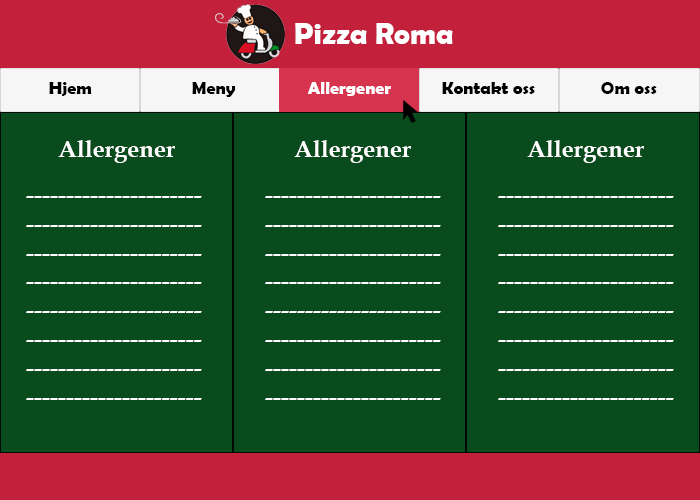
<style>
.page{position:relative;width:700px;height:500px;background:#094b1c}
.page>*{position:absolute;margin:0}
.t1{font:30px "BerlinSansFBDemi-Bold";color:#ffffff}
.t2{font:18px "BerlinSansFBDemi-Bold";color:#000000}
.t3{font:18px "BerlinSansFBDemi-Bold";color:#ffffff}
.t4{font:24px "BookAntiqua-Bold";color:#ffffff}
</style>
<div class="page">
<p class="t1" style="left:295px;top:23px;width:158px;height:21px">Pizza Roma</p>
<p class="t2" style="left:49px;top:82px;width:43px;height:14px">Hjem</p>
<p class="t2" style="left:192px;top:82px;width:44px;height:15px">Meny</p>
<p class="t3" style="left:307px;top:82px;width:84px;height:14px">Allergener</p>
<p class="t2" style="left:442px;top:82px;width:93px;height:12px">Kontakt oss</p>
<p class="t2" style="left:601px;top:82px;width:56px;height:12px">Om oss</p>
<p class="t4" style="left:58px;top:140px;width:117px;height:23px">Allergener</p>
<p class="t4" style="left:294px;top:140px;width:117px;height:23px">Allergener</p>
<p class="t4" style="left:527px;top:140px;width:117px;height:23px">Allergener</p>
<p class="t4" style="left:26px;top:196px;width:176px;height:204px">----------------------<br>----------------------<br>----------------------<br>----------------------<br>----------------------<br>----------------------<br>----------------------<br>----------------------</p>
<p class="t4" style="left:265px;top:196px;width:176px;height:204px">----------------------<br>----------------------<br>----------------------<br>----------------------<br>----------------------<br>----------------------<br>----------------------<br>----------------------</p>
<p class="t4" style="left:498px;top:196px;width:176px;height:204px">----------------------<br>----------------------<br>----------------------<br>----------------------<br>----------------------<br>----------------------<br>----------------------<br>----------------------</p>
</div>
